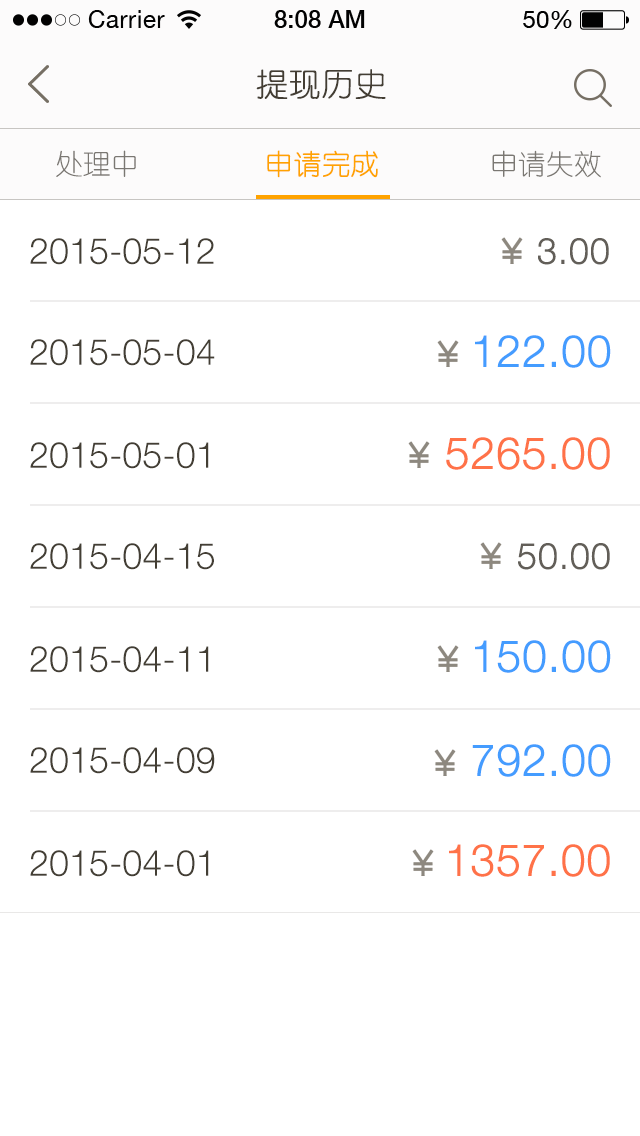
<style>
.page{position:relative;width:640px;height:1136px;background:#ffffff}
.page>*{position:absolute;margin:0}
.t1{font:32px "YouYuan";color:#433d33;text-transform:uppercase;font-weight:bold}
.t2{font:28px "YouYuan";color:#7a7772;text-transform:uppercase}
.t3{font:28px "YouYuan";color:#ffa300;text-transform:uppercase;font-weight:bold}
.t4{font:36px "HelveticaNeueLTPro-Lt";color:#433e34;text-transform:uppercase}
.t5{font:36px "HelveticaNeueLTPro-Lt";color:#625e58;text-transform:uppercase;font-weight:bold}
.t6{font:44px "HelveticaNeueLTPro-Lt";color:#449cff;text-transform:uppercase;font-weight:bold}
.t7{font:44px "HelveticaNeueLTPro-Lt";color:#ff7248;text-transform:uppercase;font-weight:bold}
</style>
<div class="page">
<p class="t1" style="left:256px;top:69px;width:130px;height:30px">提现历史</p>
<p class="t2" style="left:56px;top:150px;width:80px;height:27px">处理中</p>
<p class="t3" style="left:267px;top:150px;width:111px;height:28px">申请完成</p>
<p class="t2" style="left:492px;top:150px;width:109px;height:28px">申请失效</p>
<p class="t4" style="left:30px;top:238px;width:184px;height:27px">2015-05-12</p>
<p class="t5" style="left:538px;top:238px;width:71px;height:27px">3.00</p>
<p class="t4" style="left:30px;top:339px;width:185px;height:27px">2015-05-04</p>
<p class="t6" style="left:475px;top:335px;width:136px;height:33px">122.00</p>
<p class="t7" style="left:446px;top:437px;width:164px;height:33px">5265.00</p>
<p class="t4" style="left:30px;top:442px;width:179px;height:27px">2015-05-01</p>
<p class="t4" style="left:30px;top:543px;width:184px;height:27px">2015-04-15</p>
<p class="t5" style="left:518px;top:543px;width:92px;height:27px">50.00</p>
<p class="t6" style="left:475px;top:640px;width:136px;height:33px">150.00</p>
<p class="t4" style="left:30px;top:646px;width:179px;height:27px">2015-04-11</p>
<p class="t4" style="left:30px;top:747px;width:185px;height:27px">2015-04-09</p>
<p class="t6" style="left:472px;top:744px;width:139px;height:33px">792.00</p>
<p class="t7" style="left:449px;top:844px;width:161px;height:33px">1357.00</p>
<p class="t4" style="left:30px;top:850px;width:179px;height:27px">2015-04-01</p>
</div>
